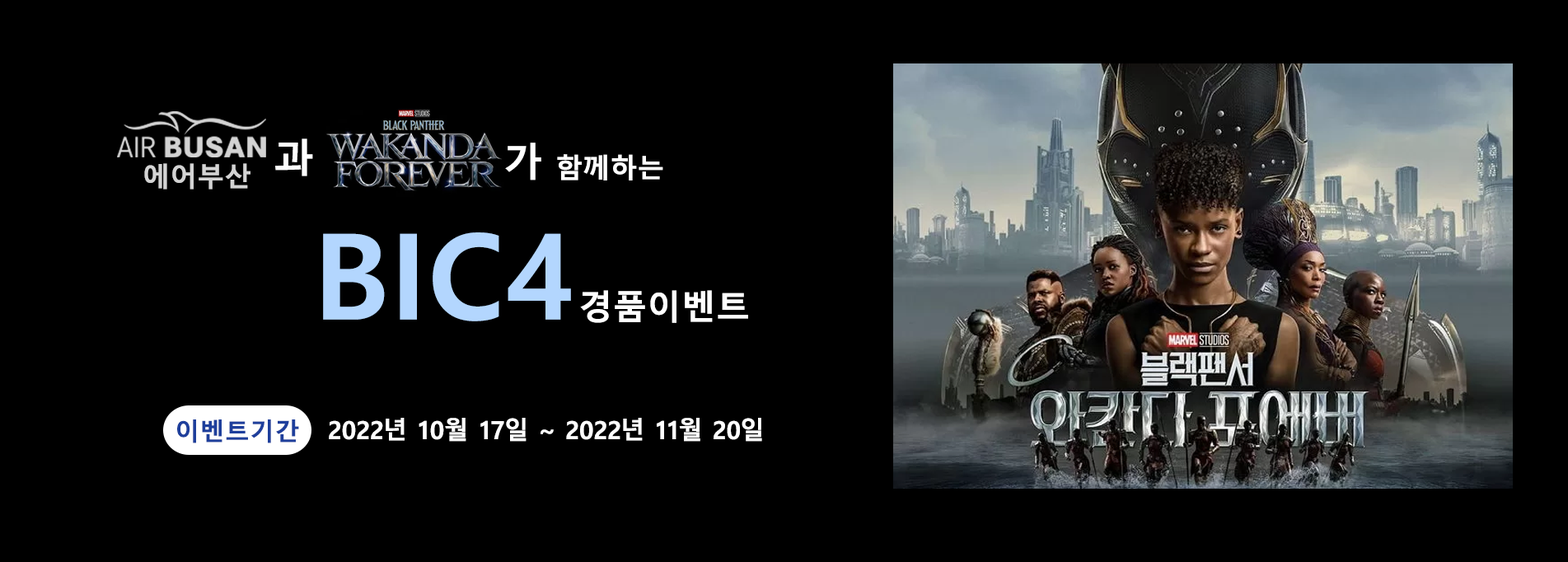
<style>
.page{position:relative;width:1568px;height:562px;background:#000000}
.page>*{position:absolute;margin:0}
.t1{font:39px "MalgunGothicBold";letter-spacing:0.01em;color:#ffffff}
.t2{font:27px "MalgunGothicBold";letter-spacing:0.01em;color:#ffffff}
.t3{font:27px "MalgunGothicBold";letter-spacing:0.01em;color:#d3d3d3}
.t4{font:119px "MalgunGothicBold";letter-spacing:0.01em;color:#b3d6fe}
.t5{font:34.2px "MalgunGothicBold";letter-spacing:0.01em;color:#ffffff}
.t6{font:24.7px "MalgunGothicBold";letter-spacing:0.01em;color:#1e3f9c}
.t7{font:24.7px "MalgunGothicBold";letter-spacing:0.01em;color:#ffffff}
</style>
<div class="page">
<p class="t1" style="left:275px;top:138px;width:38px;height:38px">과</p>
<p class="t1" style="left:505px;top:143px;width:36px;height:37px">가</p>
<p class="t2" style="left:557px;top:154px;width:106px;height:26px">함께하는</p>
<p class="t3" style="left:144px;top:163px;width:106px;height:27px">에어부산</p>
<p class="t4" style="left:323px;top:232px;width:248px;height:89px">BIC4</p>
<p class="t5" style="left:580px;top:290px;width:168px;height:33px">경품이벤트</p>
<p class="t6" style="left:177px;top:419px;width:122px;height:24px">이벤트기간</p>
<p class="t7" style="left:329px;top:418px;width:433px;height:24px">2022년 10월 17일 ~ 2022년 11월 20일</p>
</div>
